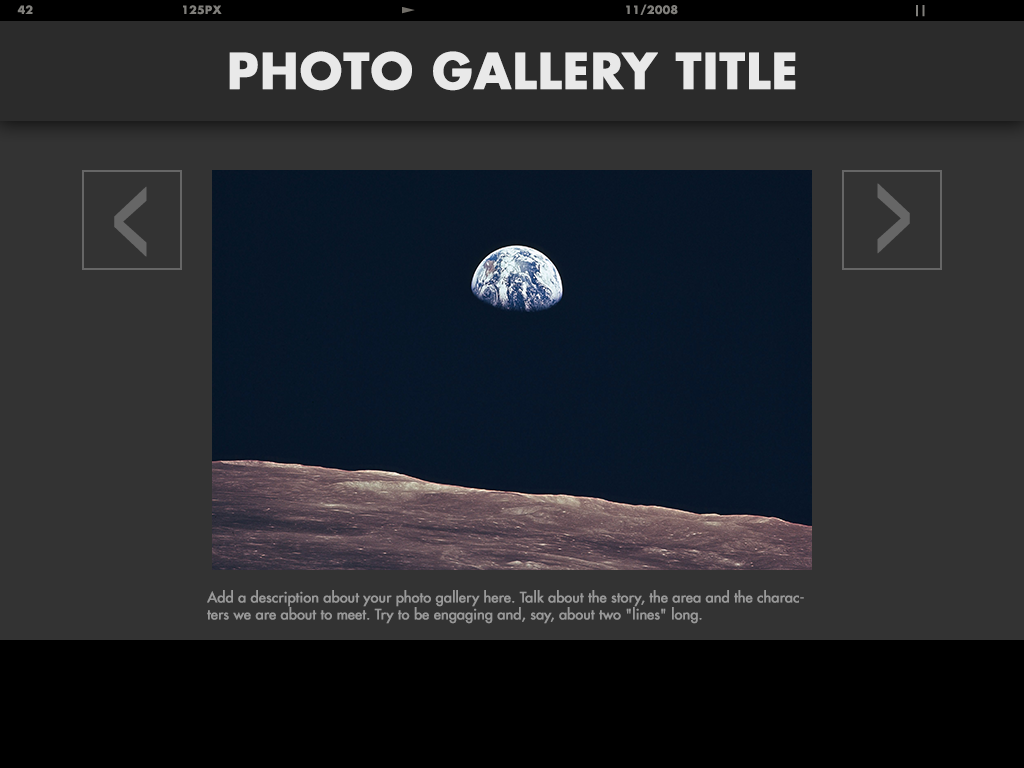
<style>
.page{position:relative;width:1024px;height:768px;background:#333333}
.page>*{position:absolute;margin:0}
.t1{font:48px "Futura-Bold";color:#e9e9e9;font-weight:bold}
.t2{font:14px "Futura";color:#999999;font-weight:bold}
</style>
<div class="page">
<p class="t1" style="left:229px;top:51px;width:567px;height:40px">PHOTO GALLERY TITLE</p>
<p class="t2" style="left:207px;top:590px;width:597px;height:34px">Add a description about your photo gallery here. Talk about the story, the area and the characters we are about to meet. Try to be engaging and, say, about two "lines" long.</p>
</div>
